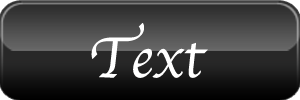
<style>
.page{position:relative;width:300px;height:100px}
.page>*{position:absolute;margin:0}
.t1{font:60px "Apple-Chancery";color:#ffffff}
</style>
<div class="page">
<p class="t1" style="left:91px;top:23px;width:117px;height:55px">Text</p>
</div>
